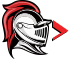
<style>
.page{position:relative;width:69px;height:59px;background:#ffffff}
.page>*{position:absolute;margin:0}
.t1{font:36px "Stencil";color:#ec2327}
</style>
<div class="page">
<p class="t1" style="left:53px;top:20px;width:16px;height:21px">&gt;</p>
</div>
